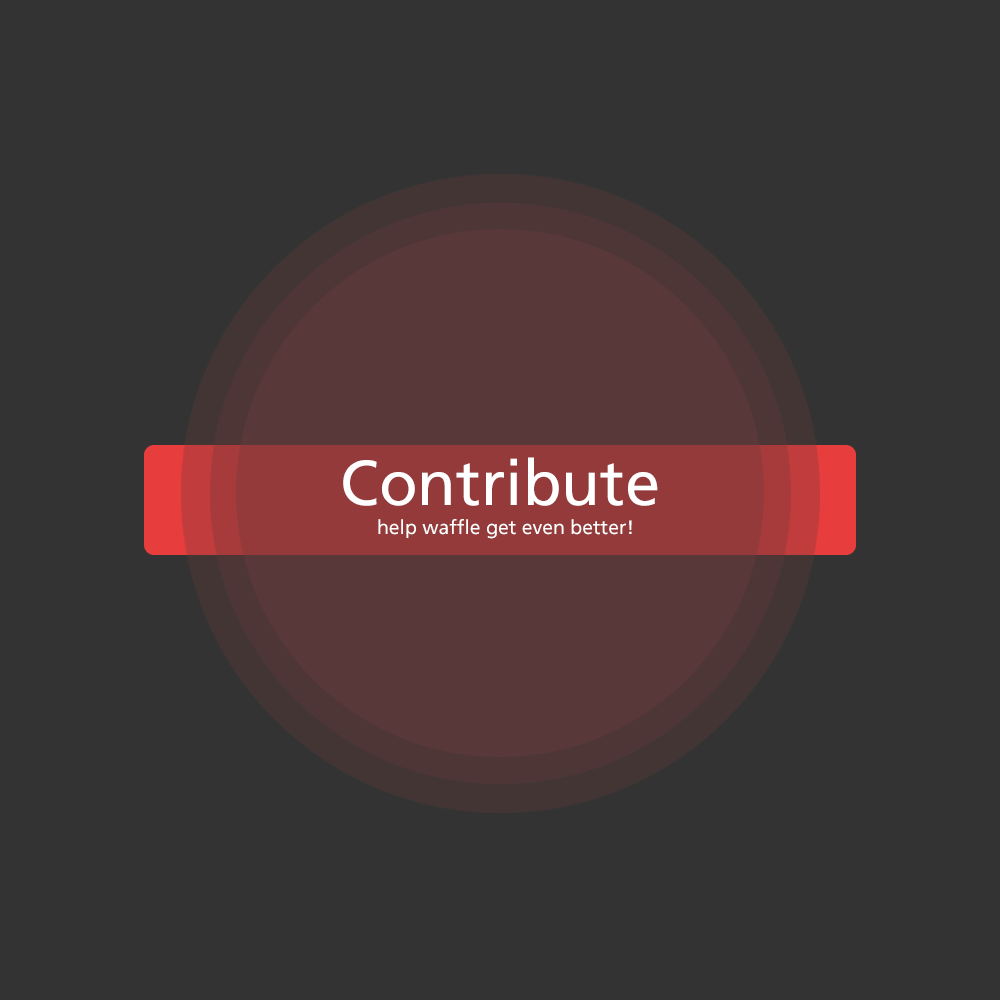
<style>
.page{position:relative;width:1000px;height:1000px;background:#333333}
.page>*{position:absolute;margin:0}
.t1{font:63.2px "FrutigerLinotype-Roman";color:#ffffff}
.t2{font:19.4px "FrutigerLinotype-Roman";color:#ffffff}
</style>
<div class="page">
<p class="t1" style="left:343px;top:457px;width:315px;height:49px">Contribute</p>
<p class="t2" style="left:378px;top:519px;width:254px;height:20px">help waffle get even better!</p>
</div>
